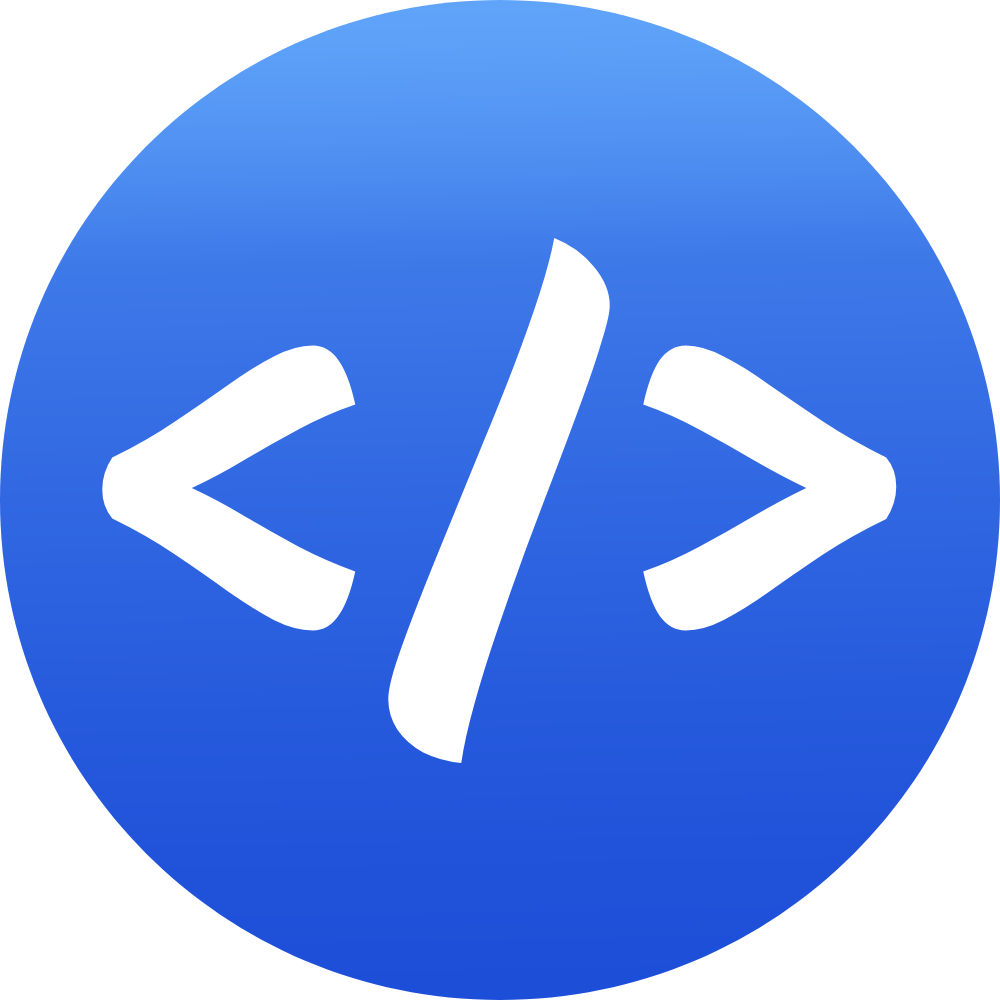
<style>
.page{position:relative;width:1000px;height:1000px;background:#ffffff}
.page>*{position:absolute;margin:0}
.t1{font:500px "Merienda-ExtraBold";color:#ffffff}
</style>
<div class="page">
<p class="t1" style="left:102px;top:237px;width:795px;height:526px">&lt;/&gt;</p>
</div>
